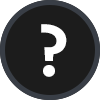
<style>
.page{position:relative;width:100px;height:100px;background:#1c1c1c}
.page>*{position:absolute;margin:0}
.t1{font:75px "Consolas-Bold";color:#ffffff}
</style>
<div class="page">
<p class="t1" style="left:41px;top:24px;width:26px;height:53px">?</p>
</div>
